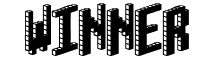
<style>
.page{position:relative;width:220px;height:70px;background:#ffffff}
.page>*{position:absolute;margin:0}
.t1{font:55px "Blox-BRK";color:#000000}
</style>
<div class="page">
<p class="t1" style="left:24px;top:3px;width:165px;height:53px">winner</p>
</div>
